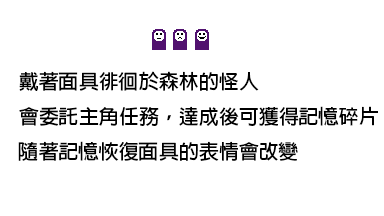
<style>
.page{position:relative;width:384px;height:216px;background:#ffffff}
.page>*{position:absolute;margin:0}
.t1{font:20px "AdobeFanHeitiStd-Bold";color:#000000}
</style>
<div class="page">
<p class="t1" style="left:18px;top:71px;width:360px;height:90px">戴著面具徘徊於森林的怪人<br>會委託主角任務，達成後可獲得記憶碎片<br>隨著記憶恢復面具的表情會改變</p>
</div>
